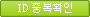
<style>
.page{position:relative;width:90px;height:17px}
.page>*{position:absolute;margin:0}
.t1{font:12px "morris9";letter-spacing:-0.03em;color:#ffffff}
</style>
<div class="page">
<p class="t1" style="left:18px;top:3px;width:54px;height:10px">ID 중복확인</p>
</div>
